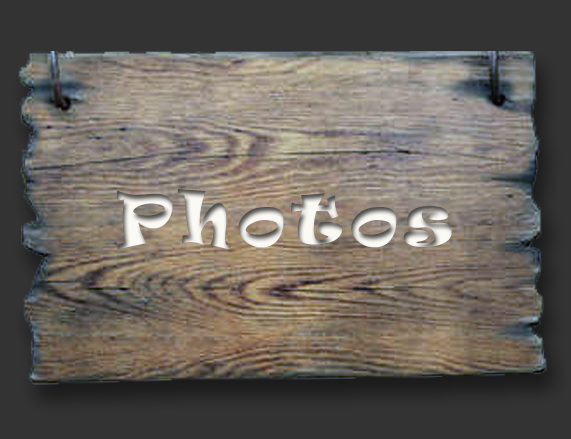
<style>
.page{position:relative;width:571px;height:439px;background:#333333}
.page>*{position:absolute;margin:0}
.t1{font:66.7px "Ravie";letter-spacing:0.1em}
</style>
<div class="page">
<p class="t1" style="left:116px;top:189px;width:336px;height:61px">Photos</p>
</div>
